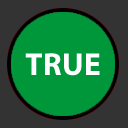
<style>
.page{position:relative;width:128px;height:128px;background:#00973b}
.page>*{position:absolute;margin:0}
.t1{font:32px "MyriadPro-Bold";color:#ffffff}
</style>
<div class="page">
<p class="t1" style="left:25px;top:53px;width:75px;height:23px">TRUE</p>
</div>
